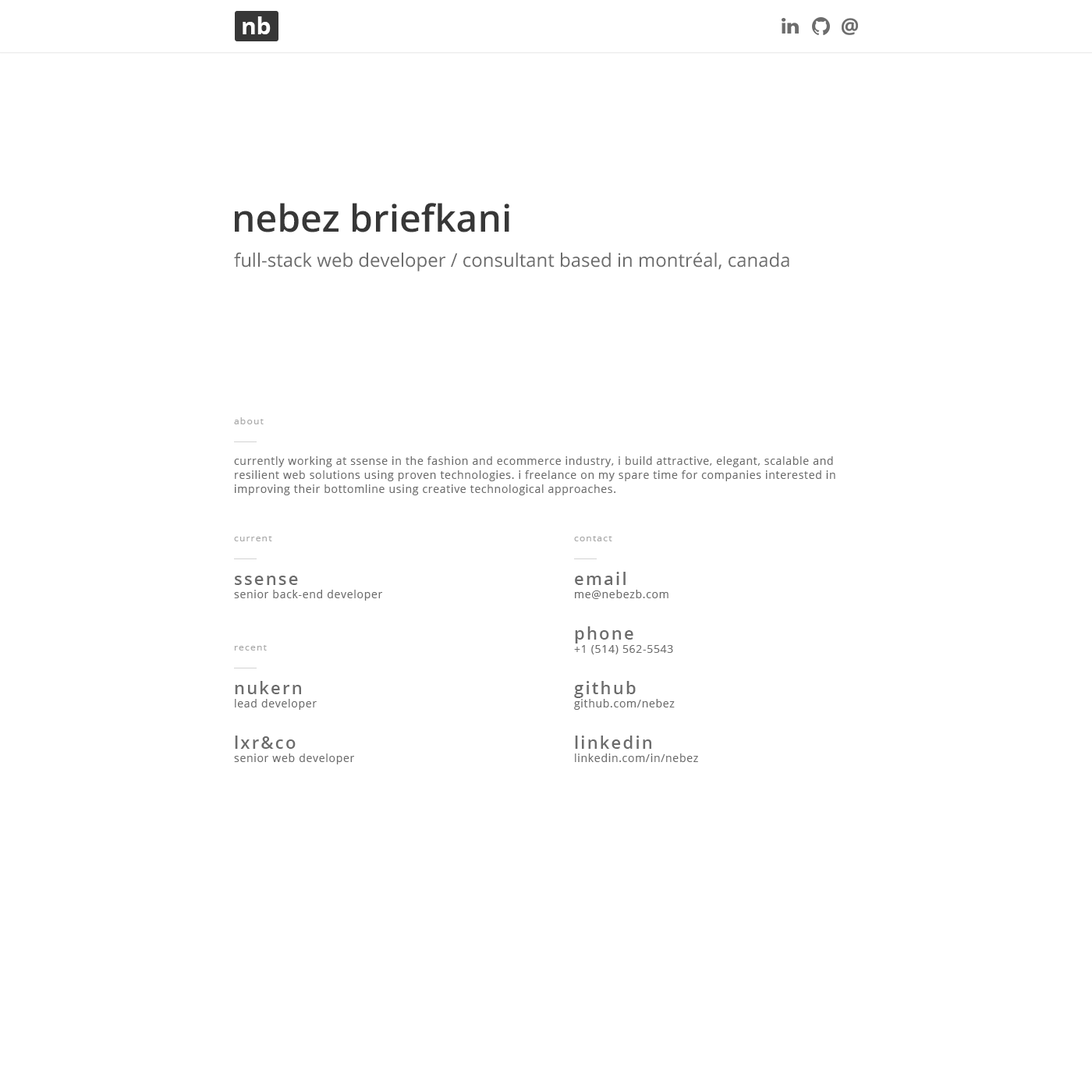
<style>
.page{position:relative;width:1092px;height:1092px;background:#ffffff}
.page>*{position:absolute;margin:0}
.t1{font:23.4px "OpenSans-Bold";color:#ffffff}
.t2{font:37.4px "OpenSans-Semibold";color:#373737}
.t3{font:18.7px "OpenSans";color:#6c6c6c}
.t4{font:9.4px "OpenSans";letter-spacing:0.1em;color:#a8a8a8}
.t5{font:10.9px/14px "OpenSans";letter-spacing:0.05em;color:#6c6c6c}
.t6{font:17.2px "OpenSans-Semibold";letter-spacing:0.1em;color:#6c6c6c}
.t7{font:10.9px "OpenSans";letter-spacing:0.05em;color:#6c6c6c}
</style>
<div class="page">
<p class="t1" style="left:243px;top:16px;width:28px;height:18px">nb</p>
<p class="t2" style="left:235px;top:203px;width:274px;height:29px">nebez briefkani</p>
<p class="t3" style="left:234px;top:252px;width:555px;height:19px">full-stack web developer / consultant based in montréal, canada</p>
<p class="t4" style="left:234px;top:417px;width:30px;height:7px">about</p>
<p class="t5" style="left:234px;top:456px;width:601px;height:39px">currently working at ssense in the fashion and ecommerce industry, i build attractive, elegant, scalable and resilient web solutions using proven technologies. i freelance on my spare time for companies interested in improving their bottomline using creative technological approaches.</p>
<p class="t4" style="left:234px;top:536px;width:38px;height:5px">current</p>
<p class="t4" style="left:574px;top:536px;width:38px;height:5px">contact</p>
<p class="t6" style="left:235px;top:576px;width:63px;height:9px">ssense</p>
<p class="t6" style="left:575px;top:572px;width:51px;height:13px">email</p>
<p class="t7" style="left:234px;top:590px;width:149px;height:11px">senior back-end developer</p>
<p class="t7" style="left:575px;top:590px;width:93px;height:9px">me@nebezb.com</p>
<p class="t6" style="left:575px;top:626px;width:58px;height:17px">phone</p>
<p class="t4" style="left:234px;top:645px;width:33px;height:6px">recent</p>
<p class="t7" style="left:574px;top:645px;width:99px;height:9px">+1 (514) 562-5543</p>
<p class="t6" style="left:235px;top:681px;width:66px;height:13px">nukern</p>
<p class="t6" style="left:574px;top:681px;width:62px;height:17px">github</p>
<p class="t7" style="left:235px;top:699px;width:82px;height:11px">lead developer</p>
<p class="t7" style="left:574px;top:699px;width:101px;height:11px">github.com/nebez</p>
<p class="t6" style="left:235px;top:736px;width:61px;height:13px">lxr&amp;co</p>
<p class="t6" style="left:575px;top:736px;width:76px;height:13px">linkedin</p>
<p class="t7" style="left:234px;top:753px;width:121px;height:11px">senior web developer</p>
<p class="t7" style="left:575px;top:753px;width:123px;height:9px">linkedin.com/in/nebez</p>
</div>
